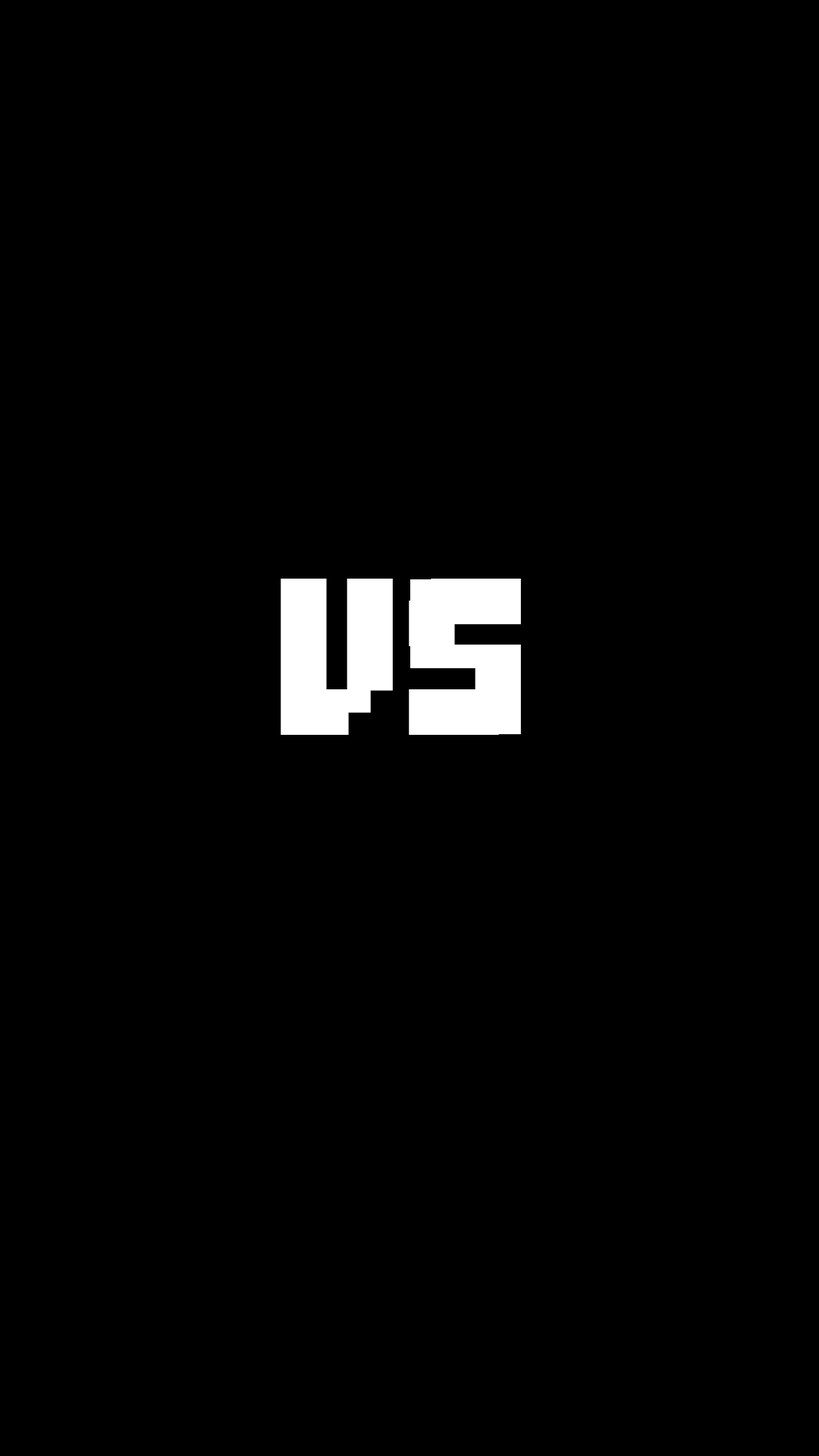
<style>
.page{position:relative;width:819px;height:1456px;background:#000000}
.page>*{position:absolute;margin:0}
.t1{font:303.3px "FFFForward";letter-spacing:-0.025em;color:#ffffff}
</style>
<div class="page">
<p class="t1" style="left:281px;top:579px;width:240px;height:156px">vs</p>
</div>
